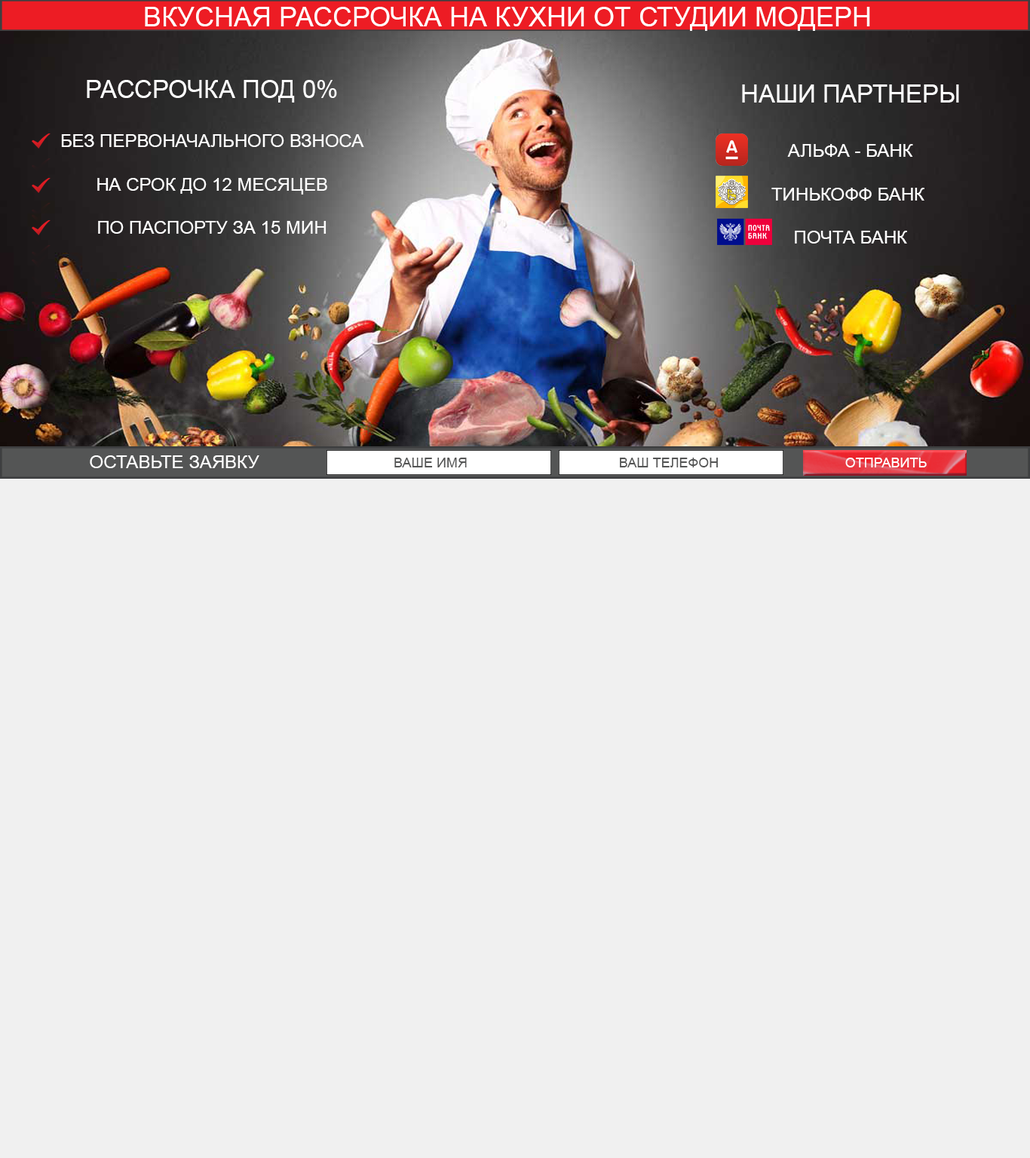
<style>
.page{position:relative;width:1030px;height:1158px;background:#f0f0f0}
.page>*{position:absolute;margin:0}
.t1{font:27.1px "ArialMT";color:#ffffff}
.t2{font:18.1px "ArialMT";color:#ffffff}
.t3{font:24.9px "ArialMT";color:#ffffff}
.t4{font:13.6px "ArialMT";color:#545555}
.t5{font:13.6px "ArialMT";color:#ffffff}
</style>
<div class="page">
<p class="t1" style="left:145px;top:7px;width:725px;height:24px">ВКУСНАЯ РАССРОЧКА НА КУХНИ ОТ СТУДИИ МОДЕРН</p>
<p class="t2" style="left:61px;top:80px;width:303px;height:154px;text-align:center"><span class="t3">РАССРОЧКА ПОД 0%<br><br></span>БЕЗ ПЕРВОНАЧАЛЬНОГО ВЗНОСА<br><br>НА СРОК ДО 12 МЕСЯЦЕВ<br><br>ПО ПАСПОРТУ ЗА 15 МИН</p>
<p class="t2" style="left:742px;top:84px;width:217px;height:159px;text-align:center"><span class="t3">НАШИ ПАРТНЕРЫ<br></span><span class="t1"><br></span>АЛЬФА - БАНК<br><br>ТИНЬКОФФ БАНК <br><br>ПОЧТА БАНК</p>
<p class="t2" style="left:90px;top:455px;width:169px;height:13px">ОСТАВЬТЕ ЗАЯВКУ</p>
<p class="t4" style="left:394px;top:458px;width:73px;height:9px">ВАШЕ ИМЯ</p>
<p class="t4" style="left:620px;top:458px;width:98px;height:9px">ВАШ ТЕЛЕФОН</p>
<p class="t5" style="left:845px;top:458px;width:82px;height:9px">ОТПРАВИТЬ</p>
</div>
